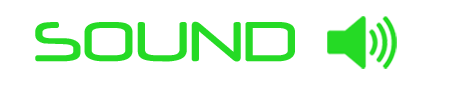
<style>
.page{position:relative;width:450px;height:90px;background:#ffffff}
.page>*{position:absolute;margin:0}
.t1{font:66px "Neuropol";color:#25da25}
</style>
<div class="page">
<p class="t1" style="left:35px;top:21px;width:260px;height:41px">SOUND</p>
</div>
